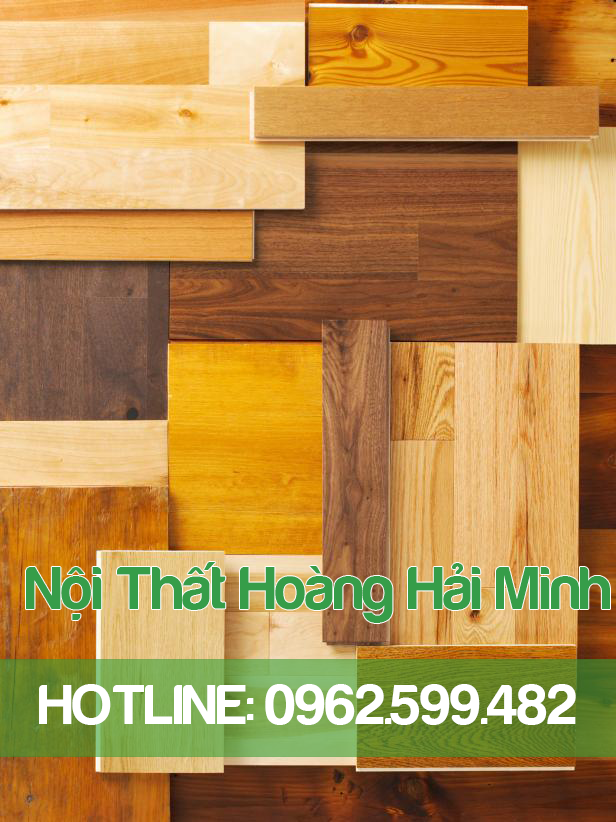
<style>
.page{position:relative;width:616px;height:822px}
.page>*{position:absolute;margin:0}
.t1{font:61.8px "FS-Harabara";color:#369d49}
.t2{font:58.4px "FS-Harabara";color:#ffffff}
</style>
<div class="page">
<p class="t1" style="left:26px;top:562px;width:584px;height:61px">Nội Thất Hoàng Hải Minh</p>
<p class="t2" style="left:39px;top:684px;width:537px;height:41px">HOTLINE: 0962.599.482</p>
</div>
